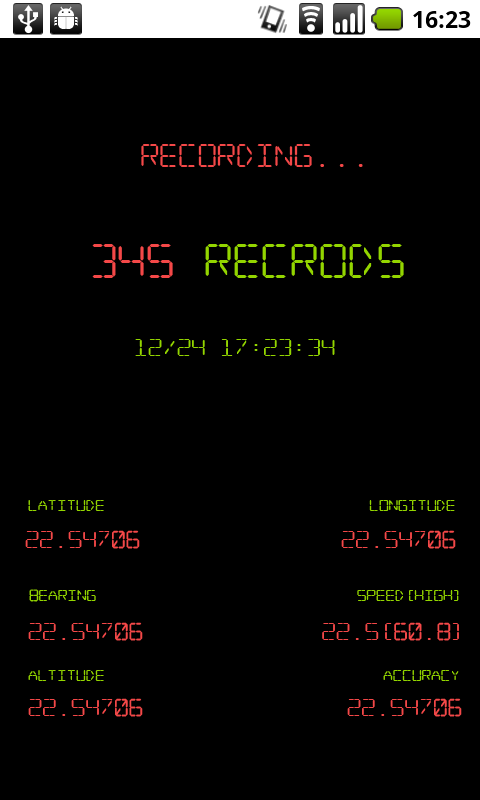
<style>
.page{position:relative;width:480px;height:800px;background:#000000}
.page>*{position:absolute;margin:0}
.t1{font:24px "Digitaldream";color:#f44848}
.t2{font:36px "Digitaldream";color:#93d500}
.t3{font:36px "Digitaldream";color:#f44848}
.t4{font:18px "Digitaldream";color:#93d500}
.t5{font:12px "Digitaldream";color:#93d500}
.t6{font:18px "Digitaldream";color:#f44848}
</style>
<div class="page">
<p class="t1" style="left:141px;top:144px;width:222px;height:23px">RECORDING...</p>
<p class="t2" style="left:92px;top:244px;width:312px;height:34px"><span class="t3">345</span> recrods</p>
<p class="t4" style="left:135px;top:339px;width:200px;height:17px">12/24 17:23:34</p>
<p class="t5" style="left:28px;top:500px;width:76px;height:11px">latitude</p>
<p class="t5" style="left:369px;top:500px;width:86px;height:11px">longitude</p>
<p class="t6" style="left:25px;top:530px;width:115px;height:19px">22.54706</p>
<p class="t6" style="left:341px;top:530px;width:115px;height:19px">22.54706</p>
<p class="t5" style="left:29px;top:589px;width:67px;height:13px">bearing</p>
<p class="t5" style="left:357px;top:590px;width:102px;height:11px">speed(HIGH)</p>
<p class="t6" style="left:28px;top:622px;width:115px;height:19px">22.54706</p>
<p class="t6" style="left:322px;top:622px;width:137px;height:19px">22.5[60.8]</p>
<p class="t5" style="left:28px;top:670px;width:76px;height:11px">altitude</p>
<p class="t5" style="left:383px;top:670px;width:76px;height:11px">accuracy</p>
<p class="t6" style="left:28px;top:698px;width:115px;height:19px">22.54706</p>
<p class="t6" style="left:347px;top:698px;width:115px;height:19px">22.54706</p>
</div>
